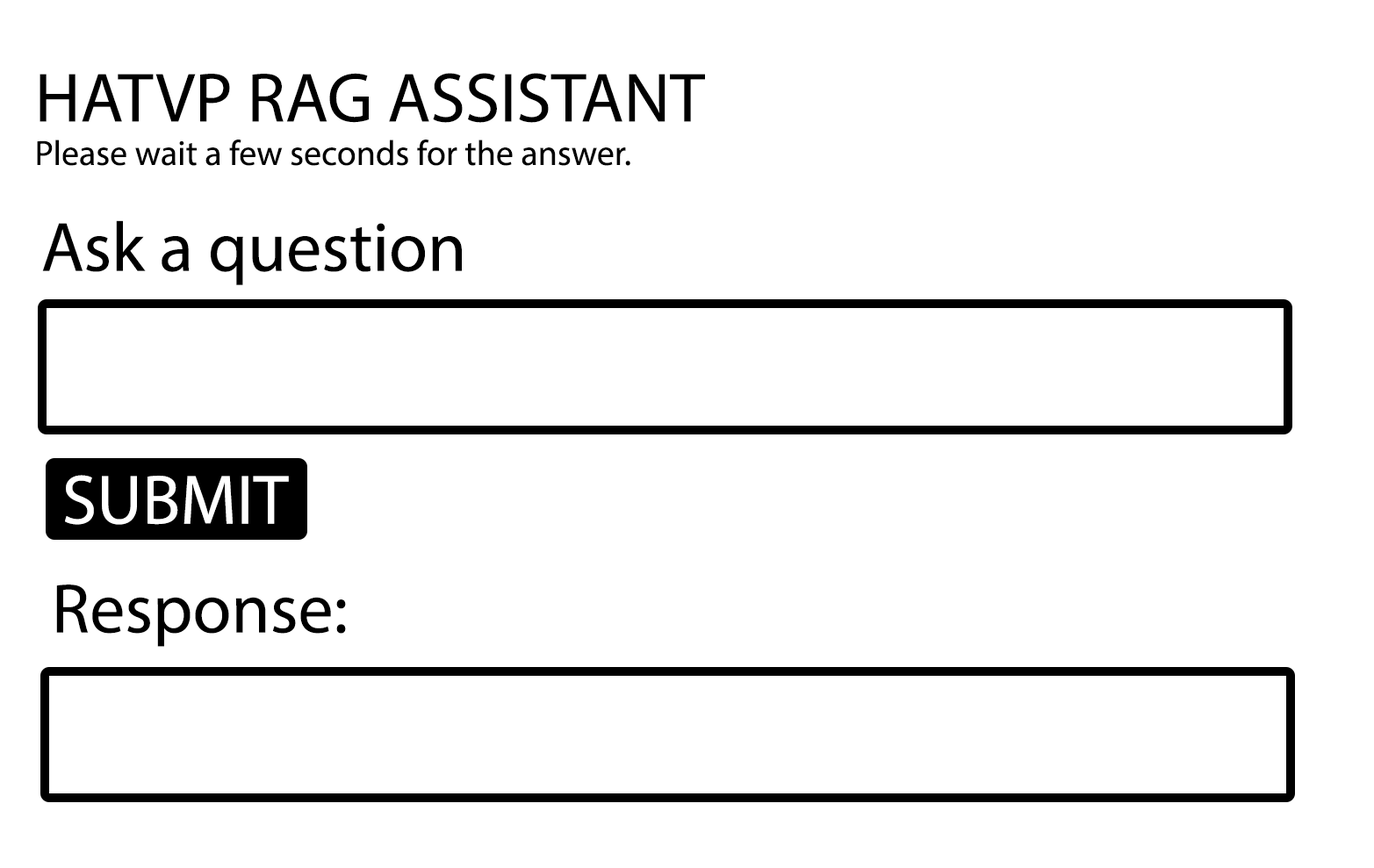
<style>
.page{position:relative;width:1374px;height:868px;background:#ffffff}
.page>*{position:absolute;margin:0}
.t1{font:70.2px "MyriadPro-Regular";color:#000000}
.t2{font:35.1px "MyriadPro-Regular";color:#000000}
.t3{font:70.2px "MyriadPro-Regular";color:#ffffff}
</style>
<div class="page">
<p class="t1" style="left:39px;top:73px;width:666px;height:50px">HATVP RAG ASSISTANT</p>
<p class="t2" style="left:37px;top:140px;width:593px;height:26px">Please wait a few seconds for the answer.</p>
<p class="t1" style="left:42px;top:220px;width:420px;height:65px">Ask a question</p>
<p class="t3" style="left:65px;top:475px;width:224px;height:50px">SUBMIT</p>
<p class="t1" style="left:56px;top:585px;width:290px;height:62px">Response:</p>
</div>
